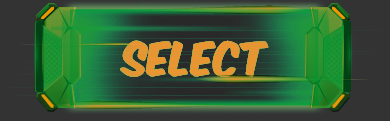
<style>
.page{position:relative;width:390px;height:121px;background:#333333}
.page>*{position:absolute;margin:0}
.t1{font:40px "KomikaAxis";color:#e89532}
</style>
<div class="page">
<p class="t1" style="left:120px;top:40px;width:149px;height:37px">Select</p>
<p class="t1" style="left:120px;top:40px;width:149px;height:37px">Select</p>
<p class="t1" style="left:120px;top:40px;width:149px;height:37px">Select</p>
</div>
